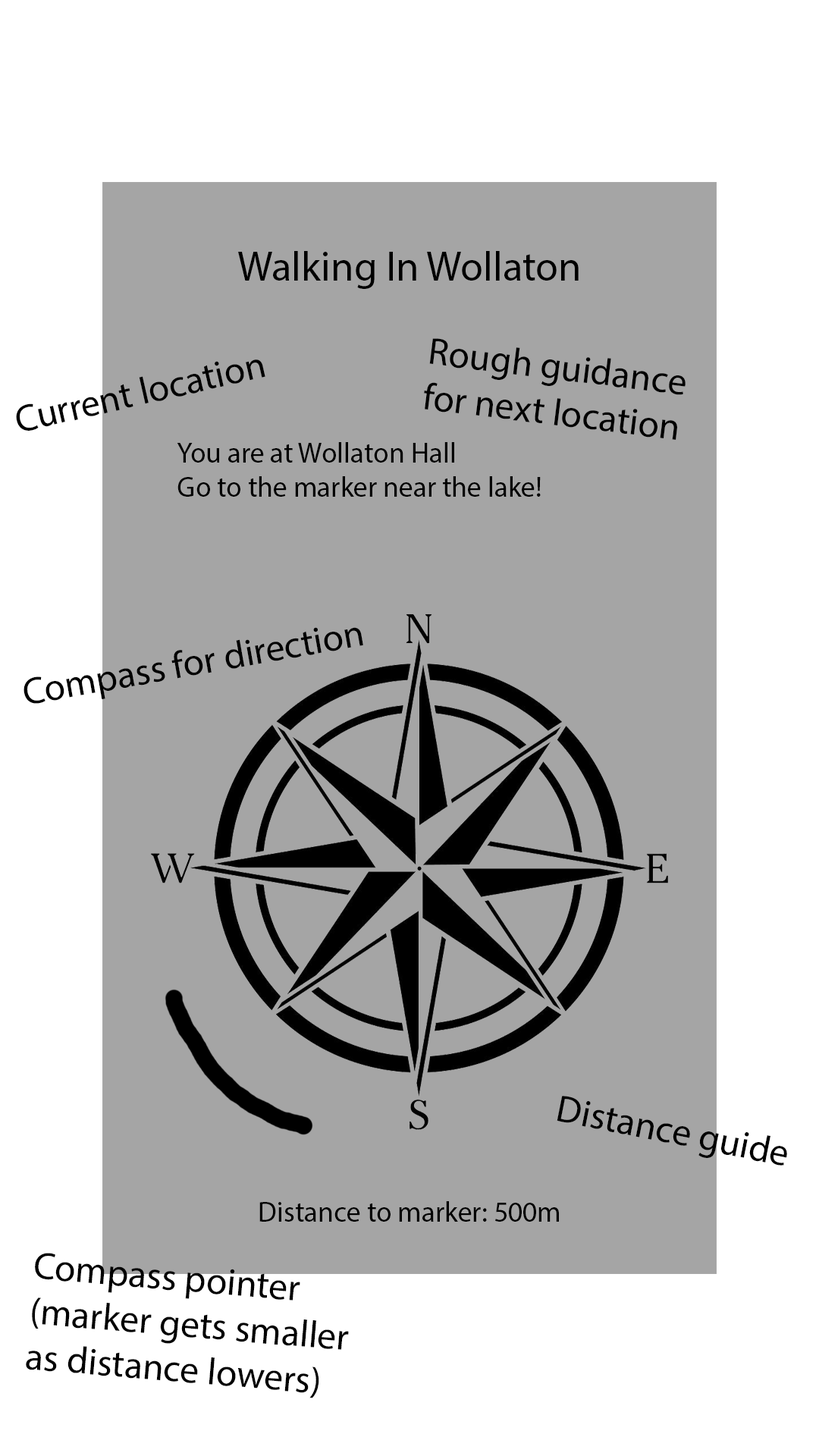
<style>
.page{position:relative;width:819px;height:1456px;background:#a5a5a5}
.page>*{position:absolute;margin:0}
.t1{font:9.9px "MyriadPro-Regular";color:#000000}
.t2{font:9.1px "MyriadPro-Regular";color:#000000}
.t3{font:6.8px "MyriadPro-Regular";color:#000000}
</style>
<div class="page">
<p class="t1" style="left:238px;top:251px;width:341px;height:38px">Walking In Wollaton</p>
<p class="t2" style="left:424px;top:338px;width:262px;height:102px;rotate:7deg">Rough guidance <br>for next location</p>
<p class="t2" style="left:16px;top:359px;width:249px;height:72px;rotate:-13deg">Current location</p>
<p class="t3" style="left:177px;top:442px;width:364px;height:55px">You are at Wollaton Hall<br>Go to the marker near the lake!</p>
<p class="t2" style="left:24px;top:627px;width:339px;height:77px;rotate:-10deg">Compass for direction</p>
<p class="t2" style="left:557px;top:1096px;width:230px;height:70px;rotate:11deg">Distance guide</p>
<p class="t3" style="left:259px;top:1201px;width:300px;height:21px">Distance to marker: 500m</p>
<p class="t2" style="left:26px;top:1253px;width:323px;height:145px;rotate:5deg">Compass pointer <br>(marker gets smaller <br>as distance lowers)</p>
</div>
